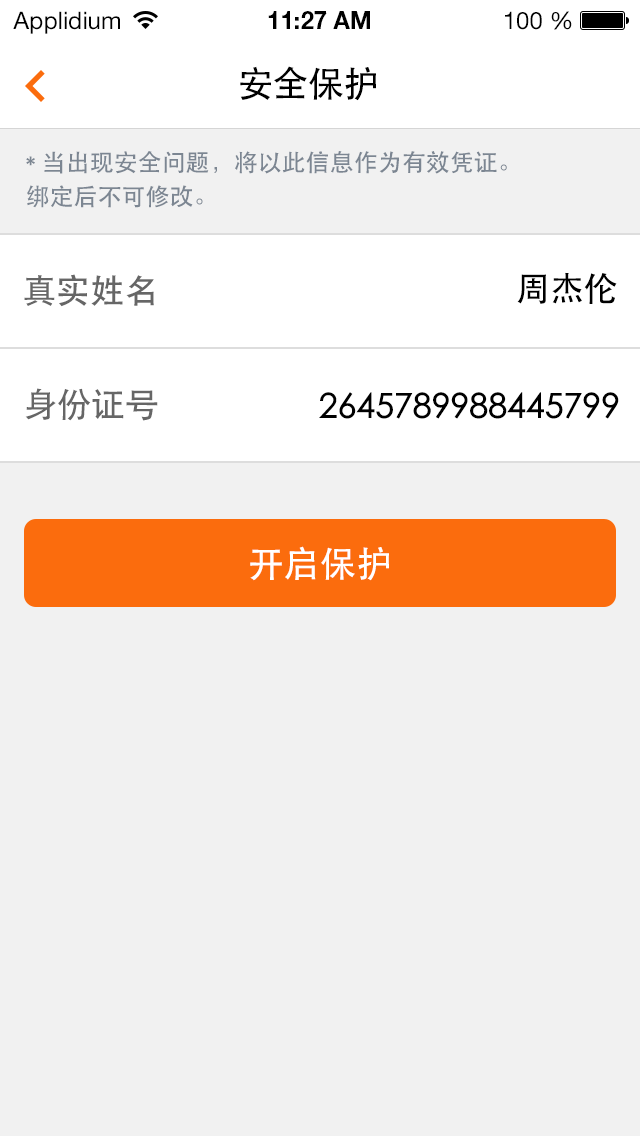
<style>
.page{position:relative;width:640px;height:1136px;background:#f1f1f1}
.page>*{position:absolute;margin:0}
.t1{font:24px "HelveticaNeueLTStd-Roman";color:#000000}
.t2{font:24px "HelveticaNeueLTStd-Bd";color:#000000}
.t3{font:36px "STHeiti";letter-spacing:-0.025em;color:#000000}
.t4{font:24px/34px "STHeiti";color:#7c8692}
.t5{font:34px "STHeiti";color:#666666}
.t6{font:34px "AdobeHeitiStd-Regular";color:#000000}
.t7{font:34px "STHeiti";color:#000000}
.t8{font:36px "STHeiti";color:#ffffff}
</style>
<div class="page">
<p class="t1" style="left:13px;top:11px;width:107px;height:23px">Applidium</p>
<p class="t2" style="left:268px;top:11px;width:102px;height:18px">11:27 AM</p>
<p class="t1" style="left:505px;top:11px;width:67px;height:19px">100 %</p>
<p class="t3" style="left:240px;top:66px;width:136px;height:35px">安全保护</p>
<p class="t4" style="left:26px;top:151px;width:481px;height:57px">* 当出现安全问题，将以此信息作为有效凭证。<br>绑定后不可修改。</p>
<p class="t5" style="left:24px;top:274px;width:130px;height:33px">真实姓名</p>
<p class="t6" style="left:517px;top:272px;width:100px;height:32px">周杰伦</p>
<p class="t5" style="left:25px;top:388px;width:133px;height:33px">身份证号</p>
<p class="t7" style="left:319px;top:392px;width:300px;height:27px">2645789988445799</p>
<p class="t8" style="left:250px;top:546px;width:139px;height:35px">开启保护</p>
</div>
